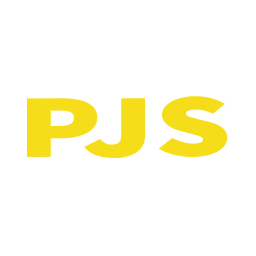
<style>
.page{position:relative;width:256px;height:256px;background:#ffffff}
.page>*{position:absolute;margin:0}
.t1{font:90px "SourceSansPro-Black";color:#f5de19;scale:1.53 1}
</style>
<div class="page">
<p class="t1" style="left:27px;top:96px;width:201px;height:62px">PJS</p>
</div>
